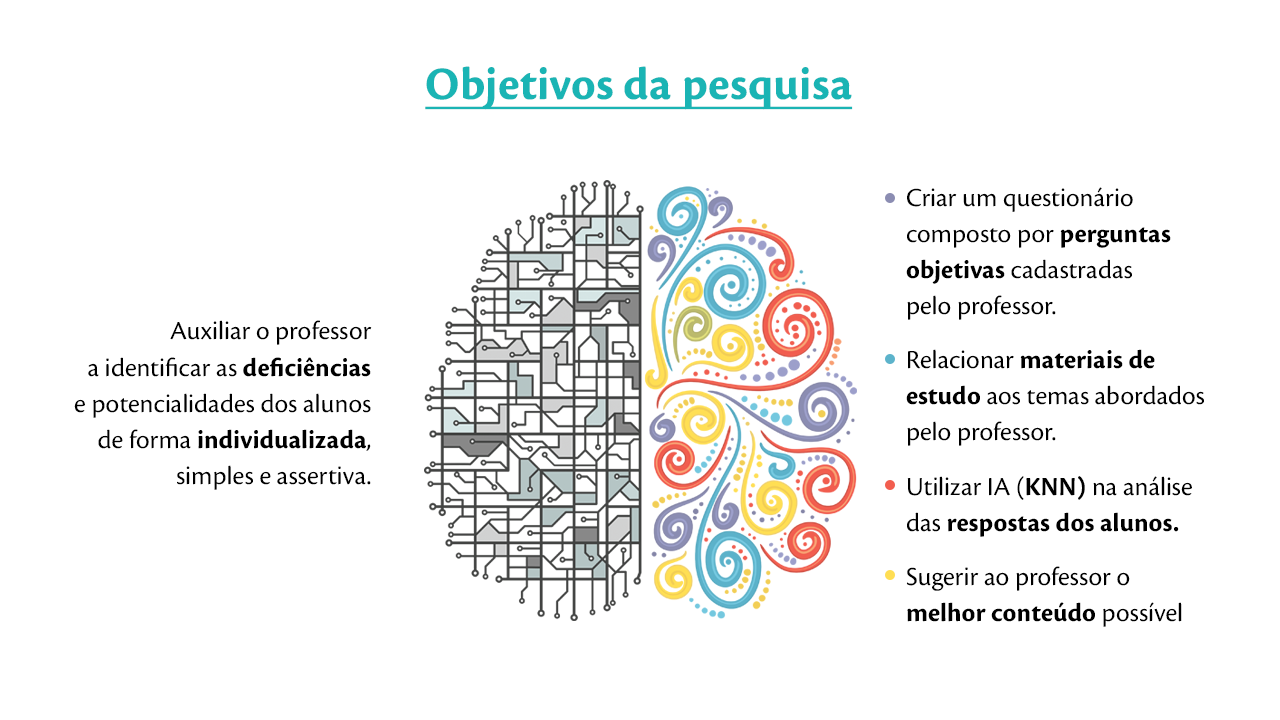
<style>
.page{position:relative;width:1280px;height:720px;background:#ffffff}
.page>*{position:absolute;margin:0}
.t1{font:48px "CronosPro-Bold";color:#1ab4b4;text-decoration:underline}
.t2{font:27px/36px "CronosPro-Regular";color:#000000}
.t3{font:27px/36px "CronosPro-Bold";color:#000000}
.t4{font:27px/18px "CronosPro-Regular";color:#000000}
.t5{font:27px/18px "CronosPro-Bold";color:#000000}
</style>
<div class="page">
<p class="t1" style="left:425px;top:66px;width:428px;height:44px">Objetivos da pesquisa</p>
<p class="t2" style="left:906px;top:187px;width:298px;height:440px">Criar um questionário composto por <span class="t3">perguntas objetivas </span>cadastradas <br>pelo pro<span class="t4">fessor.<br><br></span>Relacionar <span class="t3">materiais de estudo</span> aos temas abordados pelo professor.<br><span class="t4"><br><br>Utilizar IA (</span><span class="t5">KNN)</span><span class="t4"> na análise das </span><span class="t5">resp</span><span class="t3">ostas dos alunos.<br><br></span><span class="t4">Su</span>gerir ao professor o <br><span class="t3">melhor conteúdo</span> possível para cada aluno.</p>
<p class="t2" style="left:74px;top:320px;width:298px;height:170px;text-align:right">Auxiliar o professor <br>a identificar as <span class="t3">deficiências <br></span>e potencialidades dos alunos de forma <span class="t3">individualizada</span>, simples e assertiva.</p>
</div>
